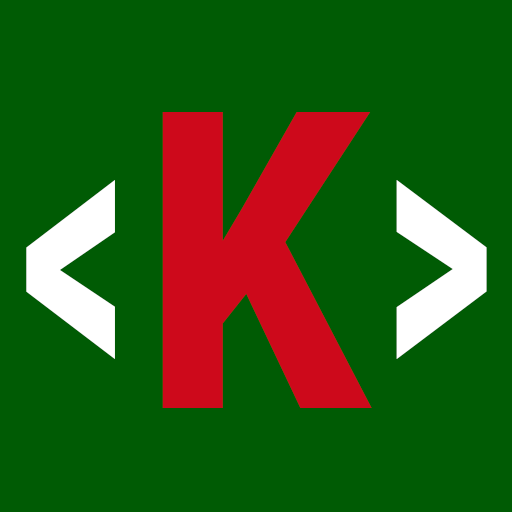
<style>
.page{position:relative;width:512px;height:512px;background:#005b04}
.page>*{position:absolute;margin:0}
.t1{font:416.7px "RobotoCondensed-Bold";color:#cd091b}
.t2{font:378.6px "RobotoCondensed-Bold";scale:0.66 1}
</style>
<div class="page">
<p class="t1" style="left:162px;top:112px;width:210px;height:296px">K</p>
<p class="t2" style="left:26px;top:115px;width:461px;height:269px">&lt; K &gt;</p>
</div>
